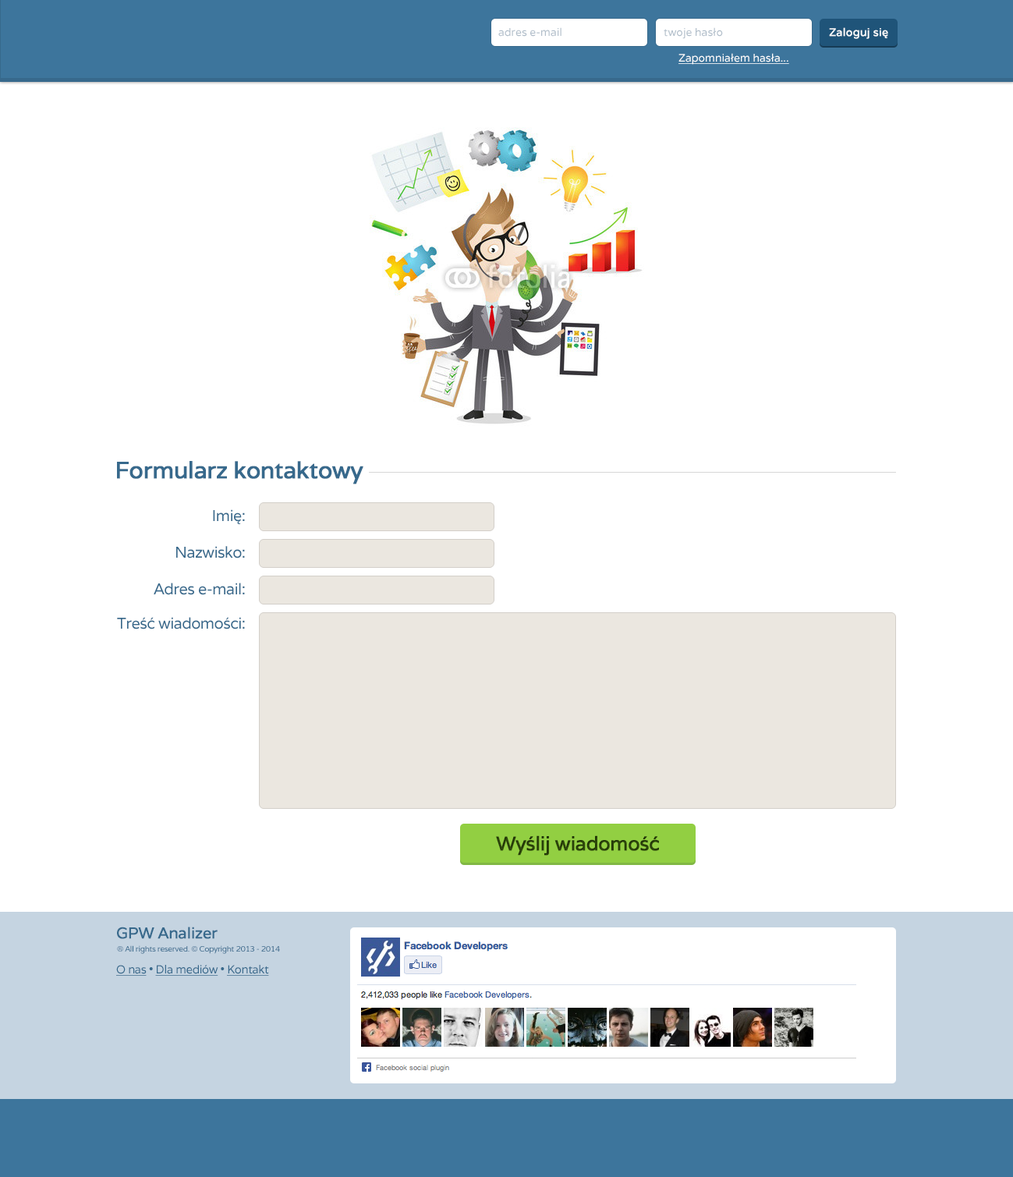
<style>
.page{position:relative;width:1013px;height:1177px;background:#ffffff}
.page>*{position:absolute;margin:0}
.t1{font:10.9px "Varela";color:#b1beca}
.t2{font:10.9px "Varela";color:#ffffff;font-weight:bold}
.t3{font:10.9px "Varela";color:#ffffff;text-decoration:underline}
.t4{font:23.4px "Varela";letter-spacing:-0.03em;color:#37698c;font-weight:bold}
.t5{font:15.6px "Varela";letter-spacing:-0.03em;color:#37698c}
.t6{font:19.5px "Varela";letter-spacing:-0.03em;color:#2f4a0b;font-weight:bold}
.t7{font:15.6px "Varela";letter-spacing:-0.03em;color:#37698c;font-weight:bold}
.t8{font:7.8px "Varela";letter-spacing:-0.03em;color:#37698c}
.t9{font:11.7px "Varela";letter-spacing:-0.03em;color:#37698c;text-decoration:underline}
.t10{font:11.7px "Varela";letter-spacing:-0.03em;color:#37698c}
</style>
<div class="page">
<p class="t1" style="left:498px;top:27px;width:64px;height:10px">adres e-mail</p>
<p class="t1" style="left:664px;top:27px;width:59px;height:12px">twoje hasło</p>
<p class="t2" style="left:829px;top:27px;width:59px;height:12px">Zaloguj się</p>
<p class="t3" style="left:679px;top:53px;width:110px;height:12px">Zapomniałem hasła...</p>
<p class="t4" style="left:117px;top:461px;width:246px;height:23px">Formularz kontaktowy</p>
<p class="t5" style="left:213px;top:509px;width:32px;height:15px">Imię:</p>
<p class="t5" style="left:176px;top:546px;width:69px;height:12px">Nazwisko:</p>
<p class="t5" style="left:154px;top:583px;width:91px;height:12px">Adres e-mail:</p>
<p class="t5" style="left:117px;top:617px;width:128px;height:12px">Treść wiadomości:</p>
<p class="t6" style="left:496px;top:835px;width:163px;height:21px">Wyślij wiadomość</p>
<p class="t7" style="left:117px;top:927px;width:101px;height:12px">GPW Analizer</p>
<p class="t8" style="left:117px;top:945px;width:163px;height:9px">® All rights reserved. © Copyright 2013 - 2014</p>
<p class="t9" style="left:116px;top:965px;width:153px;height:11px">O nas<span class="t10"> • </span>Dla mediów<span class="t10"> • </span>Kontakt</p>
</div>
